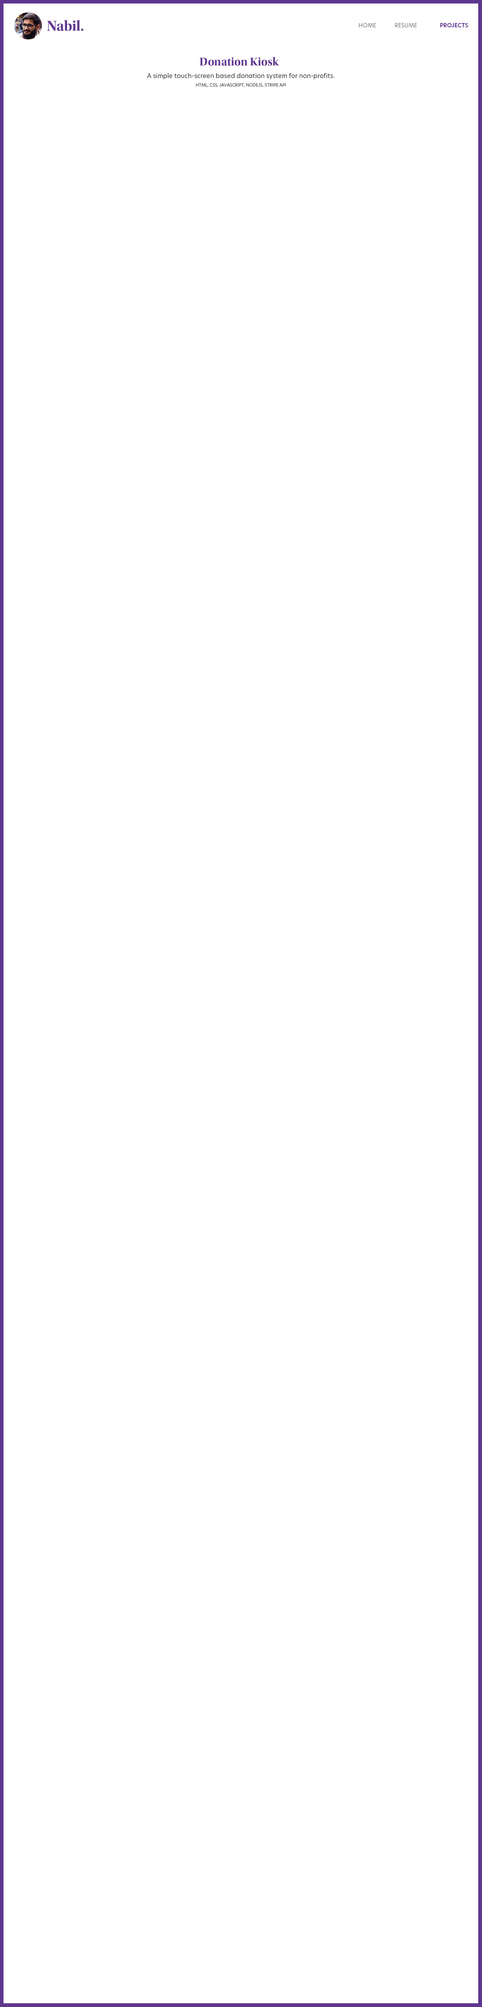
<style>
.page{position:relative;width:482px;height:2007px;background:#ffffff}
.page>*{position:absolute;margin:0}
.t1{font:14.6px "UtopiaStd-BoldDisp";color:#60378f}
.t2{font:5.6px "HeroNew-Light";color:#5b5b5b}
.t3{font:5.6px "HeroNew-SemiBold";color:#60378f}
.t4{font:11.7px "UtopiaStd-BoldDisp";color:#60378f}
.t5{font:10.9px "HeroNew-Medium";color:#494949}
.t6{font:6.3px/7.5px "HeroNew-Regular";color:#343434}
.t7{font:4.2px/8.4px "HeroNew-Regular";color:#343434}
</style>
<div class="page">
<p class="t1" style="left:47px;top:20px;width:36px;height:11px">Nabil.</p>
<p class="t2" style="left:359px;top:23px;width:109px;height:5px">HOME   RESUME   <span class="t3">PROJECTS</span></p>
<p class="t4" style="left:199px;top:57px;width:80px;height:9px"><span class="t5"> </span>Donation Kiosk</p>
<p class="t6" style="left:147px;top:73px;width:187px;height:14px;text-align:center">A simple touch-screen based donation system for non-profits.<br><span class="t7">HTML, CSS, JAVASCRIPT, NODEJS, STRIPE API</span></p>
</div>
